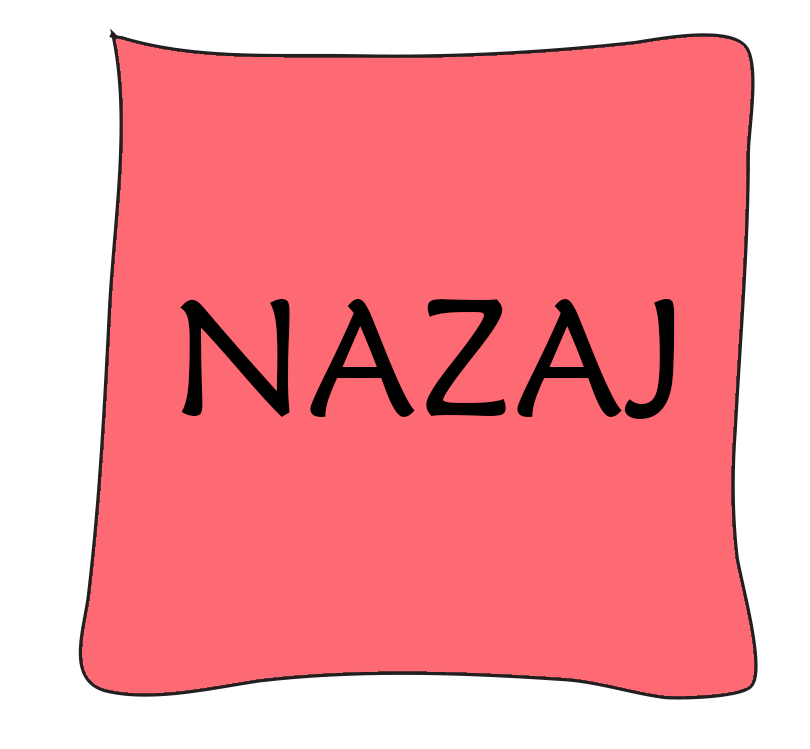
<style>
.page{position:relative;width:810px;height:749px;background:#fe6a74}
.page>*{position:absolute;margin:0}
.t1{font:166.7px "MaiandraGD-Regular";color:#000000}
</style>
<div class="page">
<p class="t1" style="left:180px;top:299px;width:495px;height:120px">NAZAJ</p>
</div>
